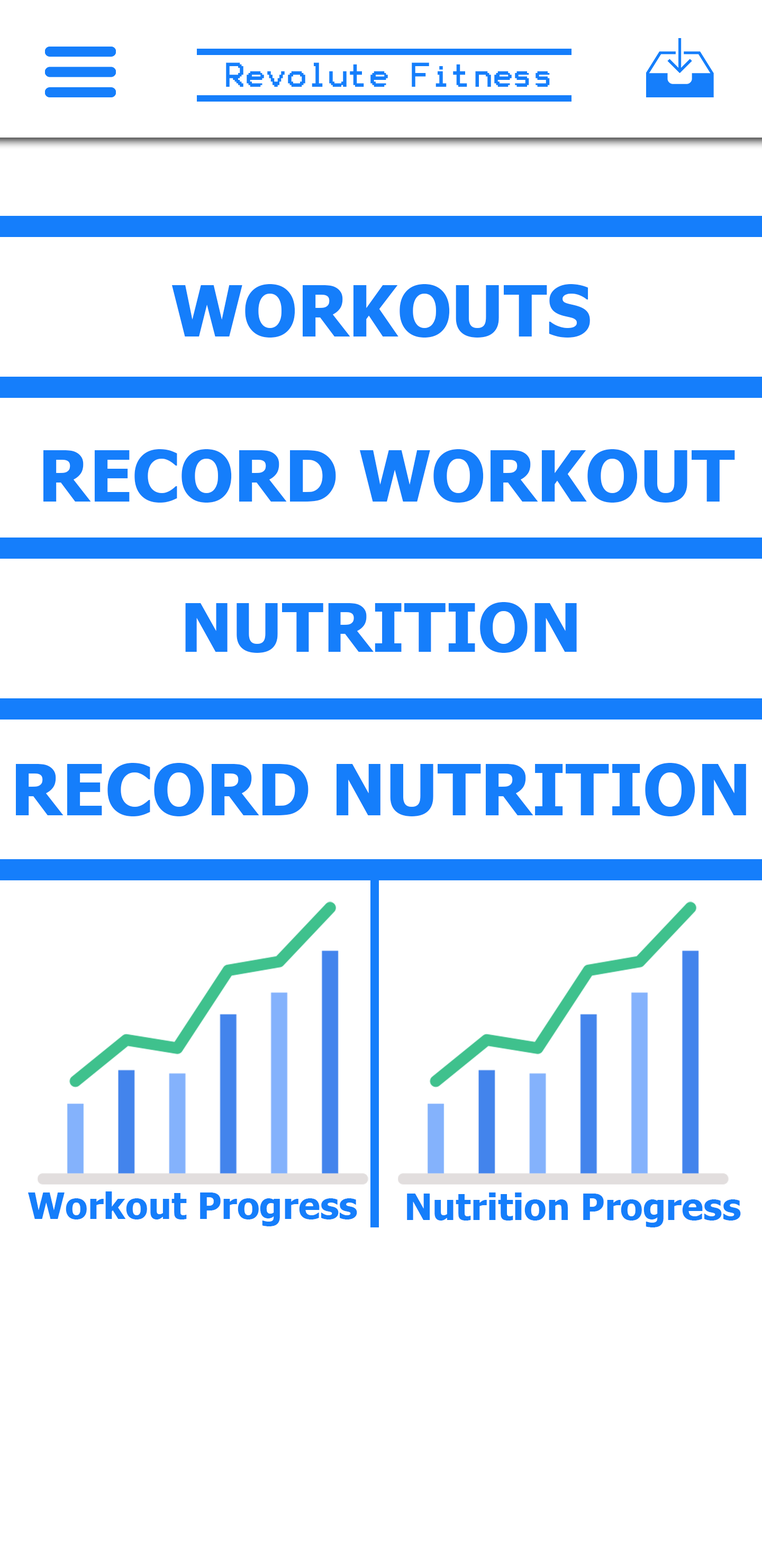
<style>
.page{position:relative;width:762px;height:1566px;background:#ffffff}
.page>*{position:absolute;margin:0}
.t1{font:27.5px "Terminal";color:#157efb}
.t2{font:70.3px "Tahoma-Bold";color:#157efb}
.t3{font:67.2px "Tahoma-Bold";color:#157efb}
.t4{font:36.5px "Tahoma-Bold";color:#157efb}
</style>
<div class="page">
<p class="t1" style="left:226px;top:62px;width:324px;height:25px">Revolute Fitness</p>
<p class="t2" style="left:171px;top:284px;width:419px;height:53px">WORKOUTS</p>
<p class="t2" style="left:43px;top:449px;width:692px;height:53px">RECORD WORKOUT</p>
<p class="t3" style="left:185px;top:602px;width:392px;height:51px">NUTRITION</p>
<p class="t2" style="left:16px;top:763px;width:730px;height:53px">RECORD NUTRITION</p>
<p class="t4" style="left:28px;top:1191px;width:329px;height:35px">Workout Progress</p>
<p class="t4" style="left:407px;top:1192px;width:333px;height:35px">Nutrition Progress</p>
</div>
